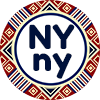
<style>
.page{position:relative;width:100px;height:100px;background:#ffffff}
.page>*{position:absolute;margin:0}
.t1{font:33.3px "ForkdokaOne-Regular";color:#00113a}
</style>
<div class="page">
<p class="t1" style="left:29px;top:24px;width:46px;height:25px">NY</p>
<p class="t1" style="left:33px;top:53px;width:39px;height:26px">ny</p>
</div>
